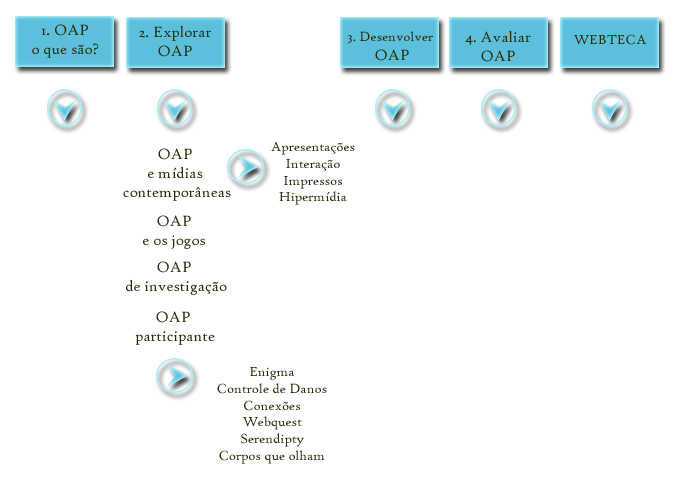
<style>
.page{position:relative;width:679px;height:483px;background:#ffffff}
.page>*{position:absolute;margin:0}
.t1{font:16px "HighTowerText-Reg";color:#2b2c0c}
.t2{font:14px "HighTowerText-Reg";color:#2b2c0c}
</style>
<div class="page">
<p class="t1" style="left:32px;top:24px;width:67px;height:34px;text-align:center">1. OAP<br>o que são?</p>
<p class="t1" style="left:139px;top:25px;width:72px;height:32px;text-align:center">2. Explorar<br>OAP</p>
<p class="t1" style="left:465px;top:30px;width:66px;height:32px;text-align:center">4. Avaliar<br>OAP</p>
<p class="t2" style="left:347px;top:31px;width:86px;height:30px;text-align:center">3. Desenvolver <br><span class="t1">OAP</span></p>
<p class="t2" style="left:574px;top:34px;width:73px;height:11px">WEBTECA</p>
<p class="t1" style="left:123px;top:148px;width:108px;height:53px;text-align:center">OAP <br>e mídias <br>contemporâneas</p>
<p class="t2" style="left:271px;top:141px;width:84px;height:64px;text-align:center">Apresentações<br>Interação<br>Impressos<br>Hipermídia</p>
<p class="t1" style="left:143px;top:215px;width:62px;height:34px;text-align:center">OAP<br>e os jogos</p>
<p class="t1" style="left:126px;top:261px;width:101px;height:34px;text-align:center">OAP <br>de investigação</p>
<p class="t1" style="left:135px;top:311px;width:80px;height:34px;text-align:center">OAP <br>participante</p>
<p class="t2" style="left:217px;top:367px;width:110px;height:97px;text-align:center">Enigma<br>Controle de Danos<br>Conexões<br>Webquest<br>Serendipty<br>Corpos que olham</p>
</div>
